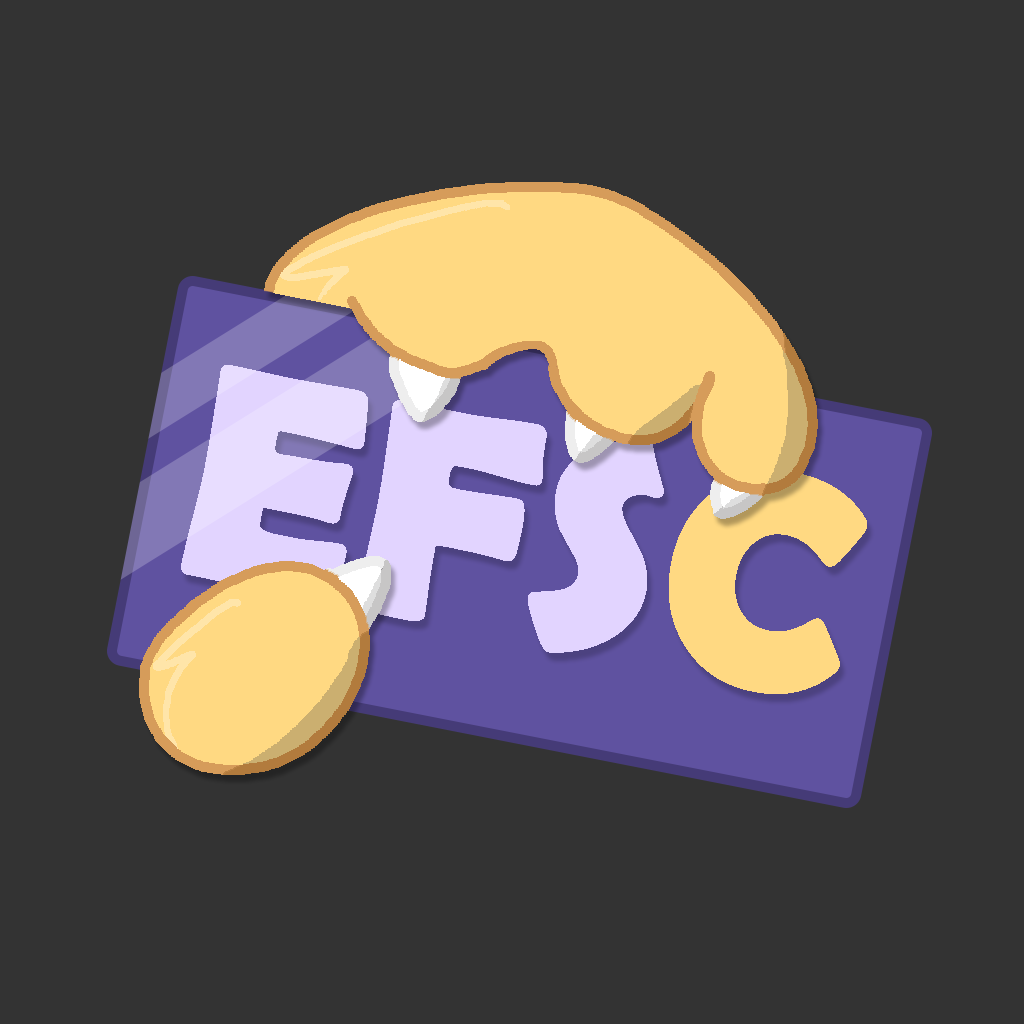
<style>
.page{position:relative;width:1024px;height:1024px;background:#333333}
.page>*{position:absolute;margin:0}
.t1{font:298.7px "BerlinSansFBDemi-Bold";color:#e2d4ff;font-weight:bold}
.t2{font:298.7px "BerlinSansFBDemi-Bold";color:#ffd982;font-weight:bold}
</style>
<div class="page">
<p class="t1" style="left:181px;top:365px;width:686px;height:329px;rotate:11deg">EFS<span class="t2">C</span></p>
</div>
